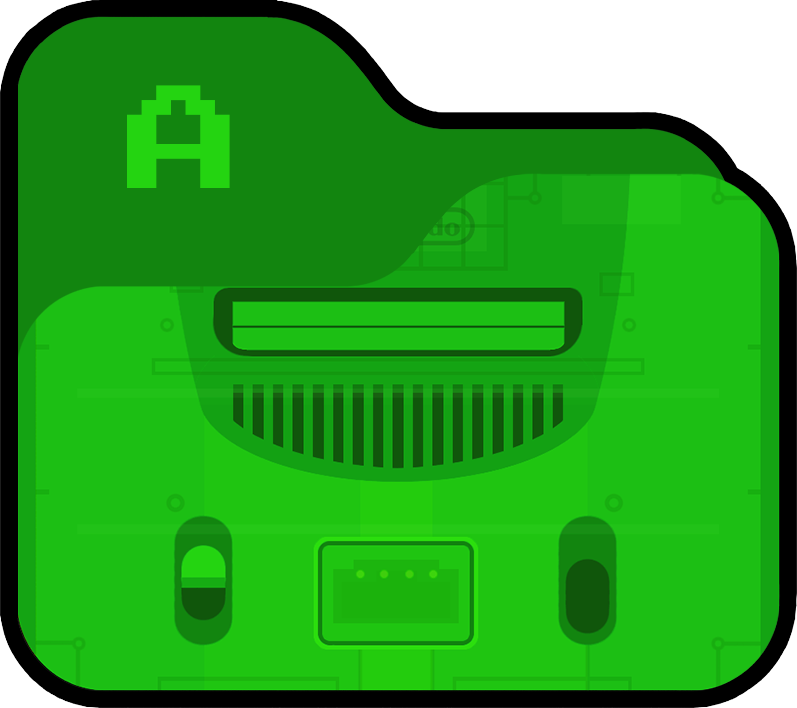
<style>
.page{position:relative;width:797px;height:708px;background:#1cbf14}
.page>*{position:absolute;margin:0}
.t1{font:150px "PixelEmulator";color:#24d411}
</style>
<div class="page">
<p class="t1" style="left:127px;top:85px;width:103px;height:103px">A</p>
</div>
